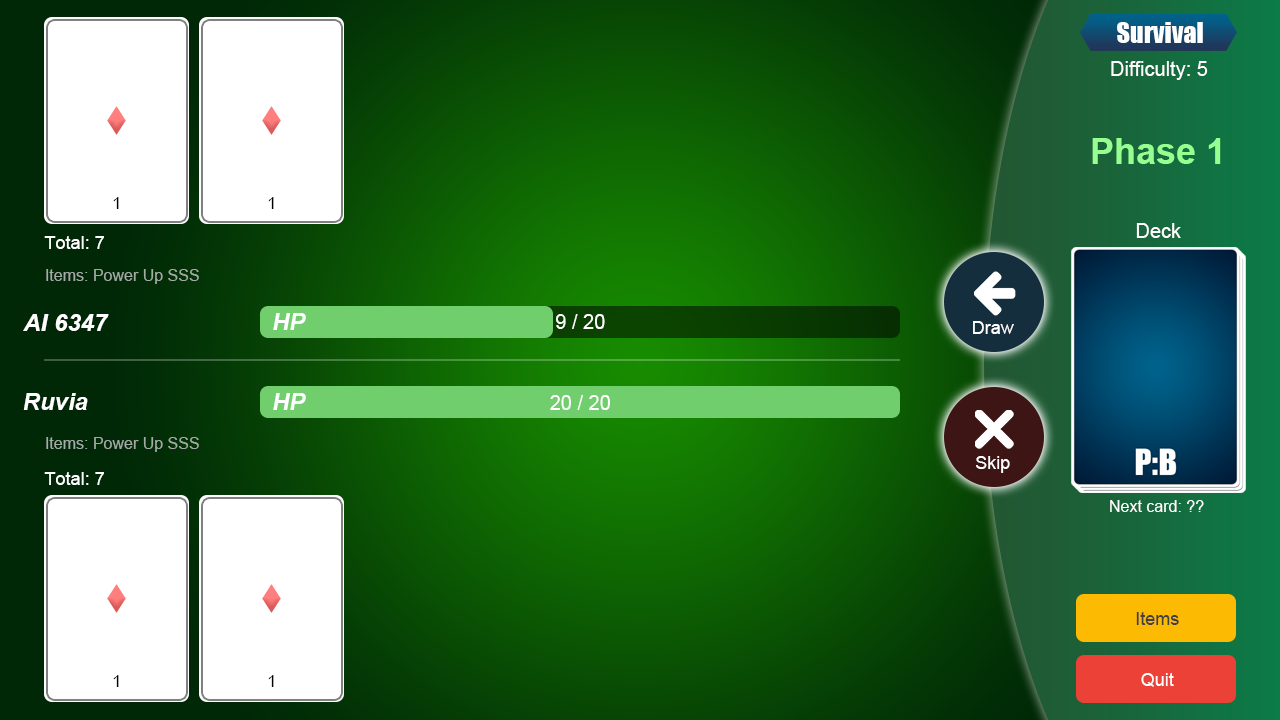
<style>
.page{position:relative;width:1280px;height:720px}
.page>*{position:absolute;margin:0}
.t1{font:26.3px "Impact";color:#ffffff}
.t2{font:20px "ArialMT";color:#ffffff}
.t3{font:36px "Arial-BoldMT";color:#95ff90}
.t4{font:16.6px "ArialMT";color:#000000}
.t5{font:18px "ArialMT";color:#ffffff}
.t6{font:16px "ArialMT";color:#a3aba5}
.t7{font:24px "Arial-BoldItalicMT";color:#ffffff}
.t8{font:16px "ArialMT";color:#ffffff}
.t9{font:18px "ArialMT";color:#404040}
</style>
<div class="page">
<p class="t1" style="left:1117px;top:22px;width:86px;height:21px">Survival</p>
<p class="t2" style="left:1111px;top:61px;width:97px;height:19px">Difficulty: 5</p>
<p class="t3" style="left:1092px;top:138px;width:129px;height:26px">Phase 1</p>
<p class="t4" style="left:113px;top:197px;width:6px;height:12px">1</p>
<p class="t4" style="left:268px;top:197px;width:6px;height:12px">1</p>
<p class="t2" style="left:1136px;top:223px;width:45px;height:15px">Deck</p>
<p class="t5" style="left:44px;top:236px;width:60px;height:13px">Total: 7</p>
<p class="t6" style="left:46px;top:269px;width:153px;height:15px">Items: Power Up SSS</p>
<p class="t7" style="left:23px;top:314px;width:86px;height:17px">AI 6347</p>
<p class="t7" style="left:273px;top:313px;width:33px;height:17px">HP</p>
<p class="t2" style="left:556px;top:314px;width:49px;height:15px">9 / 20</p>
<p class="t5" style="left:973px;top:321px;width:41px;height:13px">Draw</p>
<p class="t7" style="left:23px;top:393px;width:65px;height:17px">Ruvia</p>
<p class="t7" style="left:273px;top:393px;width:33px;height:17px">HP</p>
<p class="t2" style="left:550px;top:395px;width:60px;height:15px">20 / 20</p>
<p class="t6" style="left:46px;top:437px;width:153px;height:15px">Items: Power Up SSS</p>
<p class="t5" style="left:976px;top:456px;width:34px;height:17px">Skip</p>
<p class="t5" style="left:44px;top:472px;width:60px;height:13px">Total: 7</p>
<p class="t8" style="left:1110px;top:500px;width:94px;height:12px">Next card: ??</p>
<p class="t9" style="left:1136px;top:612px;width:43px;height:13px">Items</p>
<p class="t4" style="left:113px;top:675px;width:6px;height:12px">1</p>
<p class="t4" style="left:268px;top:675px;width:6px;height:12px">1</p>
<p class="t5" style="left:1141px;top:673px;width:33px;height:14px">Quit</p>
</div>
